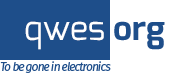
<style>
.page{position:relative;width:170px;height:75px;background:#1e4e8a}
.page>*{position:absolute;margin:0}
.t1{font:34px "Exo-Regular";color:#ffffff}
.t2{font:34px "Exo-Bold";color:#1e4e8a}
.t3{font:12px "FiraSans-Italic";letter-spacing:-0.08em;color:#1e4e8a}
</style>
<div class="page">
<p class="t1" style="left:25px;top:21px;width:79px;height:29px">qwes</p>
<p class="t2" style="left:114px;top:21px;width:51px;height:29px">org</p>
<p class="t3" style="left:0px;top:61px;width:111px;height:12px">To be gone in electronics</p>
</div>
